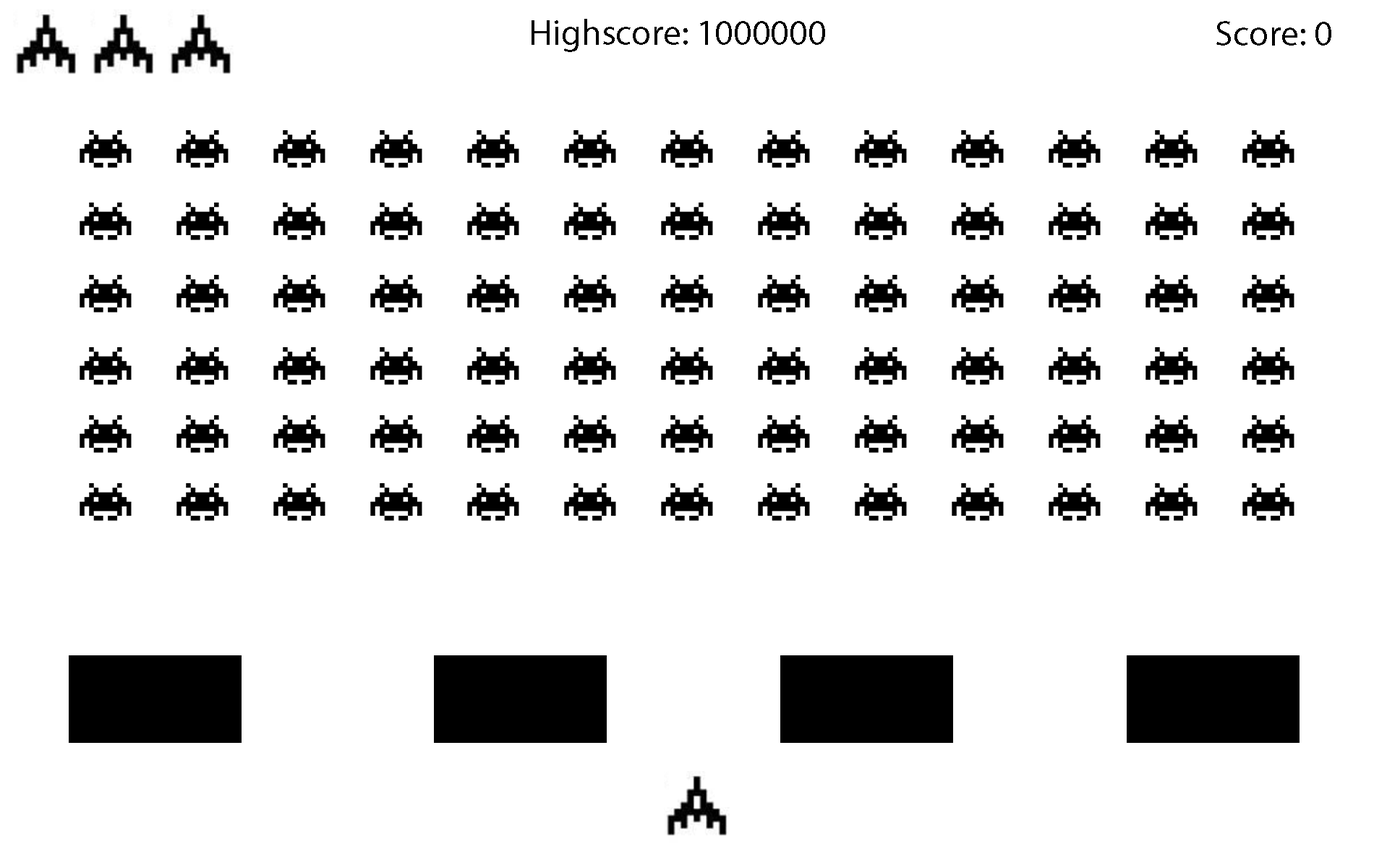
<style>
.page{position:relative;width:1374px;height:868px;background:#ffffff}
.page>*{position:absolute;margin:0}
.t1{font:36.2px "MyriadPro-Regular";color:#000000}
</style>
<div class="page">
<p class="t1" style="left:532px;top:19px;width:293px;height:33px">Highscore: 1000000</p>
<p class="t1" style="left:1216px;top:21px;width:115px;height:25px">Score: 0</p>
</div>
